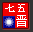
<style>
.page{position:relative;width:33px;height:32px;background:#f20000}
.page>*{position:absolute;margin:0}
.t1{font:10.4px "SimSun";color:#ffffff}
.t2{font:11.7px "SimSun";color:#ffffff}
</style>
<div class="page">
<p class="t1" style="left:5px;top:4px;width:20px;height:8px">七五</p>
<p class="t2" style="left:16px;top:15px;width:11px;height:12px">晋</p>
</div>
